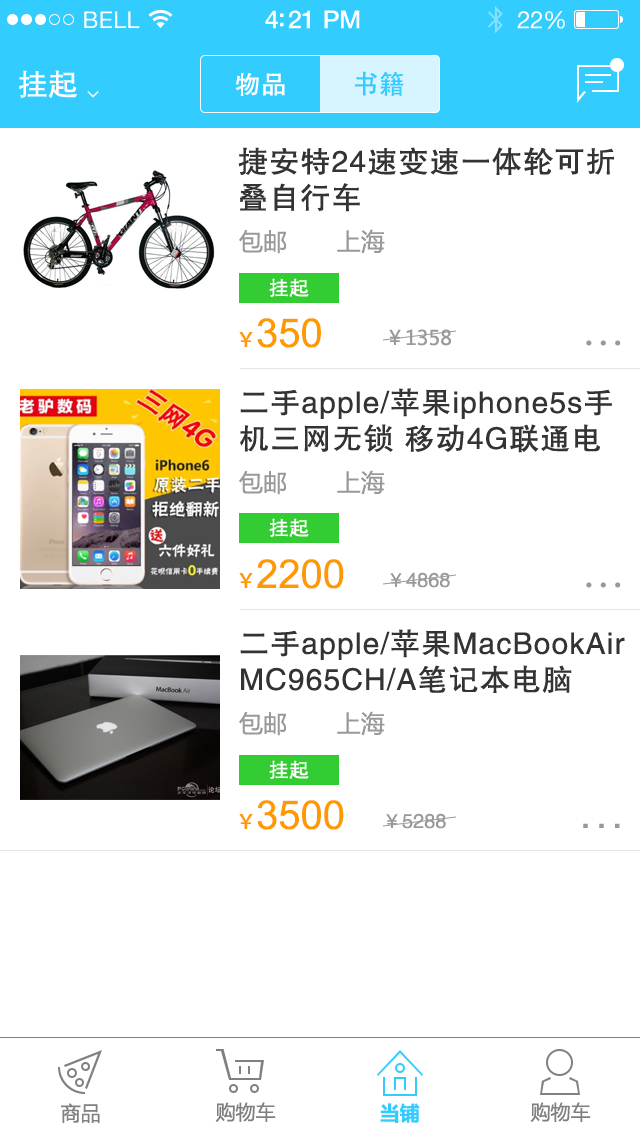
<style>
.page{position:relative;width:640px;height:1136px;background:#ffffff}
.page>*{position:absolute;margin:0}
.t1{font:23px "HelveticaNeue";letter-spacing:0.02em;color:#ffffff}
.t2{font:25px "HelveticaNeue-Medium";letter-spacing:-0.02em;color:#ffffff}
.t3{font:24px "HelveticaNeue";letter-spacing:-0.02em;color:#ffffff}
.t4{font:30px "FZHTJW--GB1-0";color:#ffffff}
.t5{font:26px "FZHTJW--GB1-0";color:#ffffff}
.t6{font:26px "AdobeHeitiStd-Regular";color:#33ccff}
.t7{font:30px/36px "FZHTJW--GB1-0";letter-spacing:0.04em;color:#333333}
.t8{font:24px "MicrosoftYaHei";color:#999999}
.t9{font:20px "FZHTJW--GB1-0";color:#ffffff}
.t10{font:40px "ArialMT";color:#ff9900}
.t11{font:20px "AdobeHeitiStd-Regular";color:#ff9900}
.t12{font:20px "MicrosoftYaHei";color:#999999}
.t13{font:40px "MicrosoftYaHei";letter-spacing:0.12em;color:#999999}
.t14{font:20px "FZHTJW--GB1-0";color:#999999}
.t15{font:40px "FZHTJW--GB1-0";letter-spacing:0.12em;color:#999999}
.t16{font:20px "MicrosoftYaHei";color:#808080}
.t17{font:20px "MicrosoftYaHei";color:#33ccff}
</style>
<div class="page">
<p class="t1" style="left:84px;top:11px;width:56px;height:17px">BELL</p>
<p class="t2" style="left:265px;top:10px;width:95px;height:19px">4:21 PM</p>
<p class="t3" style="left:517px;top:11px;width:48px;height:18px">22%</p>
<p class="t4" style="left:19px;top:70px;width:59px;height:28px">挂起</p>
<p class="t5" style="left:235px;top:73px;width:50px;height:23px">物品</p>
<p class="t6" style="left:355px;top:71px;width:49px;height:25px">书籍</p>
<p class="t7" style="left:238px;top:147px;width:376px;height:65px">捷安特24速变速一体轮可折<br>叠自行车</p>
<p class="t8" style="left:239px;top:229px;width:146px;height:25px">包邮       上海</p>
<p class="t9" style="left:269px;top:278px;width:40px;height:19px">挂起</p>
<p class="t10" style="left:239px;top:318px;width:82px;height:30px"><span class="t11">￥</span>350</p>
<p class="t12" style="left:389px;top:329px;width:62px;height:17px">￥1358</p>
<p class="t13" style="left:586px;top:340px;width:35px;height:6px">...</p>
<p class="t7" style="left:240px;top:388px;width:372px;height:65px">二手apple/苹果iphone5s手<br>机三网无锁 移动4G联通电</p>
<p class="t8" style="left:239px;top:470px;width:146px;height:25px">包邮       上海</p>
<p class="t9" style="left:269px;top:518px;width:40px;height:19px">挂起</p>
<p class="t10" style="left:239px;top:559px;width:105px;height:30px"><span class="t11">￥</span>2200</p>
<p class="t14" style="left:390px;top:572px;width:60px;height:16px">￥4868</p>
<p class="t13" style="left:586px;top:582px;width:35px;height:6px">...</p>
<p class="t7" style="left:240px;top:629px;width:385px;height:64px">二手apple/苹果MacBookAir<br>MC965CH/A笔记本电脑</p>
<p class="t8" style="left:239px;top:711px;width:146px;height:25px">包邮       上海</p>
<p class="t9" style="left:269px;top:760px;width:40px;height:19px">挂起</p>
<p class="t10" style="left:239px;top:800px;width:105px;height:30px"><span class="t11">￥</span>3500</p>
<p class="t14" style="left:386px;top:813px;width:60px;height:16px">￥5288</p>
<p class="t15" style="left:583px;top:823px;width:37px;height:5px">...</p>
<p class="t16" style="left:61px;top:1103px;width:39px;height:20px">商品</p>
<p class="t16" style="left:215px;top:1102px;width:61px;height:20px">购物车</p>
<p class="t17" style="left:380px;top:1103px;width:40px;height:20px">当铺</p>
<p class="t16" style="left:530px;top:1102px;width:61px;height:20px">购物车</p>
</div>
